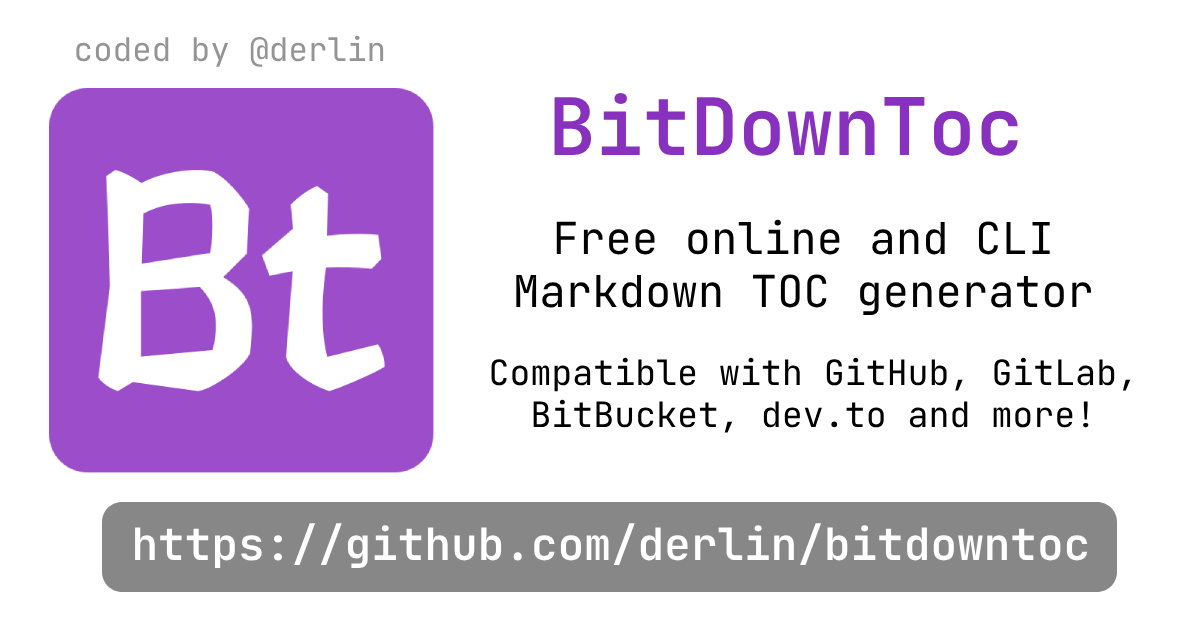
<style>
.page{position:relative;width:1202px;height:632px;background:#ffffff}
.page>*{position:absolute;margin:0}
.t1{font:32.5px "JetBrainsMono-Regular";color:#949494}
.t2{font:79.2px "JetBrainsMono-SemiBold";color:#8731be}
.t3{font:44px "JetBrainsMono-Regular";color:#000000}
.t4{font:34.9px "JetBrainsMono-Regular";color:#000000}
.t5{font:44.4px "JetBrainsMono-SemiBold";color:#ffffff}
</style>
<div class="page">
<p class="t1" style="left:76px;top:35px;width:308px;height:32px">coded by @derlin</p>
<p class="t2" style="left:554px;top:93px;width:464px;height:63px">BitDownToc</p>
<p class="t3" style="left:516px;top:219px;width:575px;height:96px;text-align:center">Free online and CLI<br>Markdown TOC generator</p>
<p class="t3" style="left:516px;top:219px;width:575px;height:96px;text-align:center">Free online and CLI<br>Markdown TOC generator</p>
<p class="t4" style="left:491px;top:357px;width:640px;height:76px;text-align:center">Compatible with GitHub, GitLab,<br>BitBucket, dev.to and more!</p>
<p class="t5" style="left:135px;top:523px;width:953px;height:45px">https://github.com/derlin/bitdowntoc</p>
</div>
